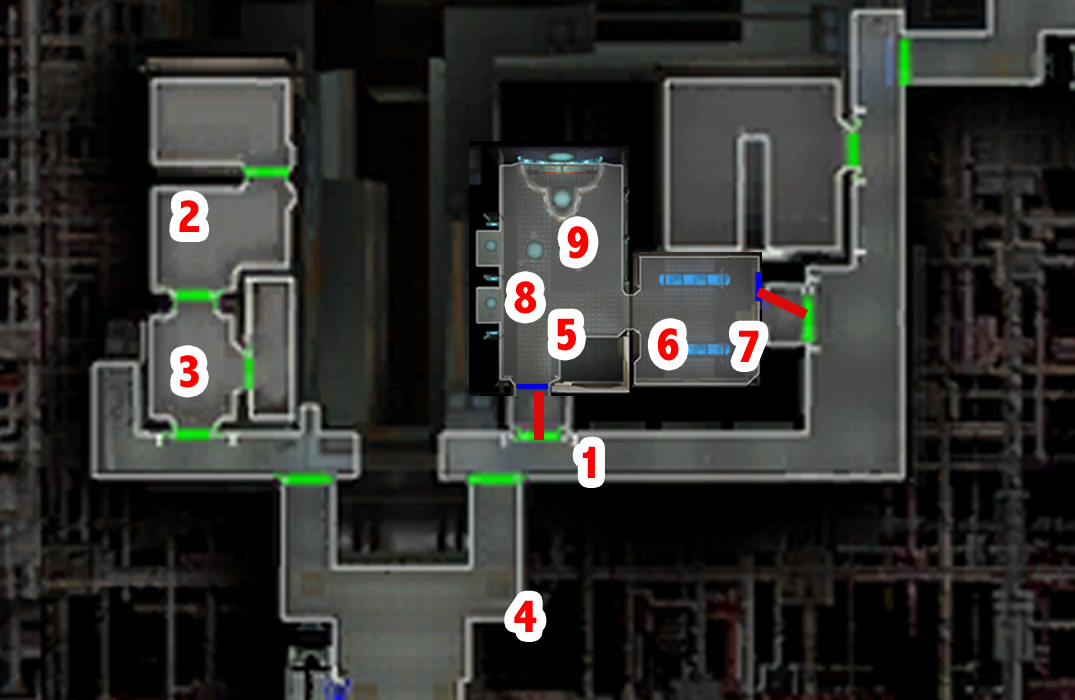
<style>
.page{position:relative;width:1075px;height:700px}
.page>*{position:absolute;margin:0}
.t1{font:48px "AbadiMT-CondensedExtraBold";color:#ff0000}
</style>
<div class="page">
<p class="t1" style="left:179px;top:200px;width:20px;height:32px">2</p>
<p class="t1" style="left:567px;top:226px;width:22px;height:33px">9</p>
<p class="t1" style="left:514px;top:281px;width:23px;height:33px">8</p>
<p class="t1" style="left:557px;top:318px;width:19px;height:33px">5</p>
<p class="t1" style="left:657px;top:328px;width:22px;height:33px">6</p>
<p class="t1" style="left:739px;top:330px;width:20px;height:32px">7</p>
<p class="t1" style="left:180px;top:355px;width:19px;height:33px">3</p>
<p class="t1" style="left:582px;top:446px;width:13px;height:32px">1</p>
<p class="t1" style="left:514px;top:600px;width:23px;height:32px">4</p>
</div>
